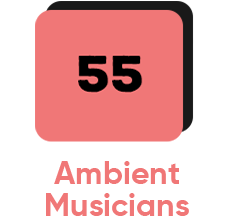
<style>
.page{position:relative;width:233px;height:216px;background:#ffffff}
.page>*{position:absolute;margin:0}
.t1{font:32px/32px "Gilroy-Bold";color:#f07777}
</style>
<div class="page">
<p class="t1" style="left:46px;top:161px;width:143px;height:55px;text-align:center">Ambient<br>Musicians</p>
</div>
